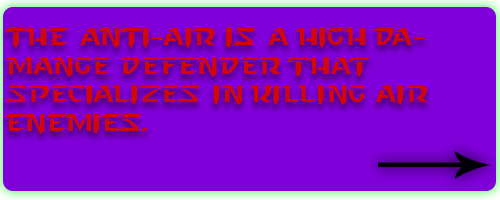
<style>
.page{position:relative;width:500px;height:200px;background:#8000d9}
.page>*{position:absolute;margin:0}
.t1{font:24px "StarcraftNormal";color:#d20606}
</style>
<div class="page">
<p class="t1" style="left:4px;top:28px;width:424px;height:106px">The anti-air is a high damange defender that <br>specializes in killing air <br>enemies.</p>
</div>
